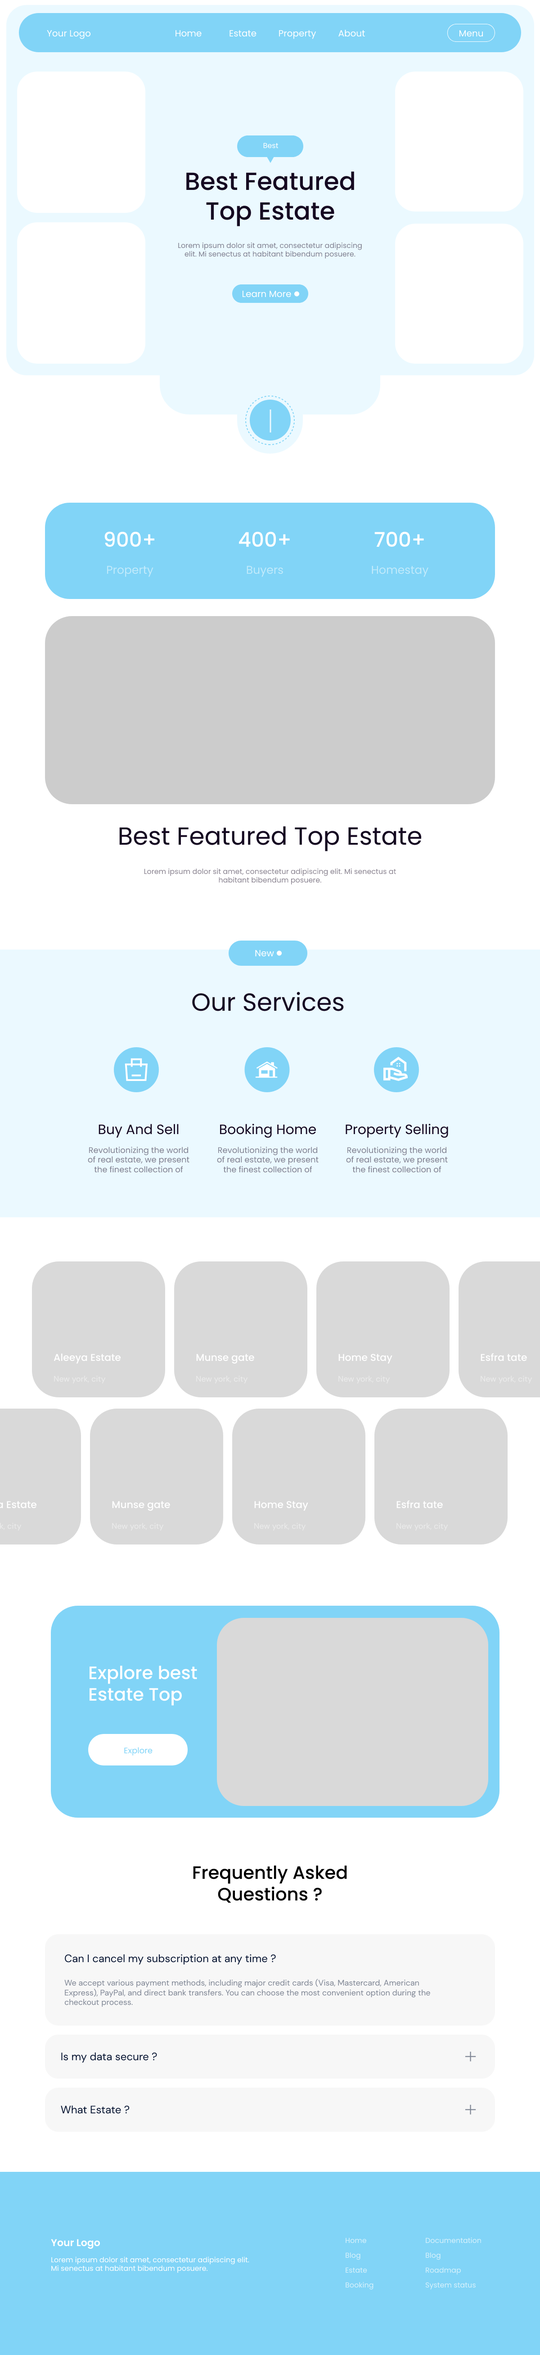
<style>
.page{position:relative;width:540px;height:2355px;background:#ffffff}
.page>*{position:absolute;margin:0}
.t1{font:9px "Poppins-Regular";color:#ffffff}
.t2{font:7.2px "Poppins-Regular";color:#ffffff}
.t3{font:24.8px "Poppins-Medium";color:#150821}
.t4{font:7.2px "Poppins-Regular";color:#808090}
.t5{font:20.2px "Poppins-Medium";color:#ffffff}
.t6{font:11.2px "Poppins-Regular";color:#c0eafb}
.t7{font:24.8px "Poppins-Regular";color:#150821}
.t8{font:7.2px "Poppins-Regular";color:#8a8390}
.t9{font:13.5px "Poppins-Regular";color:#150821}
.t10{font:8.1px "Poppins-Regular";color:#808090}
.t11{font:9.9px "Poppins-Medium";color:#ffffff}
.t12{font:8.1px "DMSans-Regular";color:#ffffff}
.t13{font:18px "Poppins-Medium";color:#ffffff}
.t14{font:8.1px "Poppins-Regular";color:#81d4f8}
.t15{font:18px "Poppins-Medium";color:#000000}
.t16{font:10.8px "DMSans-Regular";color:#071532}
.t17{font:8.1px "DMSans-Regular";color:#7f8694}
.t18{font:7.2px "Poppins-Regular";color:#d8f2fc}
.t19{font:9.9px "Poppins-SemiBold";color:#ffffff}
</style>
<div class="page">
<p class="t1" style="left:338px;top:30px;width:27px;height:7px">About</p>
<p class="t1" style="left:47px;top:30px;width:44px;height:9px">Your Logo</p>
<p class="t1" style="left:176px;top:30px;width:26px;height:7px">Home</p>
<p class="t1" style="left:230px;top:30px;width:26px;height:7px">Estate</p>
<p class="t1" style="left:279px;top:30px;width:37px;height:9px">Property</p>
<p class="t1" style="left:459px;top:30px;width:24px;height:7px">Menu</p>
<p class="t2" style="left:263px;top:143px;width:15px;height:5px">Best</p>
<p class="t3" style="left:186px;top:171px;width:168px;height:55px;text-align:center">Best Featured Top Estate</p>
<p class="t4" style="left:178px;top:242px;width:184px;height:17px;text-align:center">Lorem ipsum dolor sit amet, consectetur adipiscing elit. Mi senectus at habitant bibendum posuere.</p>
<p class="t1" style="left:243px;top:291px;width:48px;height:6px">Learn More</p>
<p class="t5" style="left:104px;top:531px;width:51px;height:16px">900+</p>
<p class="t5" style="left:239px;top:531px;width:51px;height:16px">400+</p>
<p class="t5" style="left:374px;top:531px;width:50px;height:16px">700+</p>
<p class="t6" style="left:107px;top:566px;width:46px;height:11px">Property</p>
<p class="t6" style="left:247px;top:566px;width:36px;height:11px">Buyers</p>
<p class="t6" style="left:372px;top:566px;width:56px;height:11px">Homestay</p>
<p class="t7" style="left:119px;top:826px;width:303px;height:25px">Best Featured Top Estate</p>
<p class="t8" style="left:144px;top:868px;width:252px;height:17px;text-align:center">Lorem ipsum dolor sit amet, consectetur adipiscing elit. Mi senectus at habitant bibendum posuere.</p>
<p class="t1" style="left:255px;top:950px;width:19px;height:7px">New</p>
<p class="t7" style="left:192px;top:992px;width:152px;height:19px">Our Services</p>
<p class="t9" style="left:99px;top:1124px;width:80px;height:14px">Buy And Sell</p>
<p class="t9" style="left:220px;top:1124px;width:96px;height:14px">Booking Home</p>
<p class="t9" style="left:346px;top:1124px;width:102px;height:14px">Property Selling</p>
<p class="t10" style="left:88px;top:1147px;width:101px;height:26px;text-align:center">Revolutionizing the world of real estate, we present the finest collection of</p>
<p class="t10" style="left:217px;top:1147px;width:102px;height:26px;text-align:center">Revolutionizing the world of real estate, we present the finest collection of</p>
<p class="t10" style="left:346px;top:1147px;width:102px;height:26px;text-align:center">Revolutionizing the world of real estate, we present the finest collection of</p>
<p class="t11" style="left:54px;top:1353px;width:67px;height:11px">Aleeya Estate</p>
<p class="t11" style="left:196px;top:1354px;width:58px;height:10px">Munse gate</p>
<p class="t11" style="left:338px;top:1354px;width:54px;height:10px">Home Stay</p>
<p class="t11" style="left:481px;top:1353px;width:46px;height:8px">Esfra tate</p>
<p class="t12" style="left:54px;top:1376px;width:52px;height:7px;opacity:0.5">New york, city</p>
<p class="t12" style="left:196px;top:1376px;width:52px;height:7px;opacity:0.5">New york, city</p>
<p class="t12" style="left:338px;top:1376px;width:52px;height:7px;opacity:0.5">New york, city</p>
<p class="t12" style="left:481px;top:1376px;width:51px;height:7px;opacity:0.5">New york, city</p>
<p class="t11" style="left:112px;top:1501px;width:58px;height:10px">Munse gate</p>
<p class="t11" style="left:254px;top:1501px;width:54px;height:10px">Home Stay</p>
<p class="t11" style="left:396px;top:1500px;width:47px;height:8px">Esfra tate</p>
<p class="t12" style="left:112px;top:1523px;width:52px;height:7px;opacity:0.5">New york, city</p>
<p class="t12" style="left:254px;top:1523px;width:52px;height:7px;opacity:0.5">New york, city</p>
<p class="t12" style="left:396px;top:1523px;width:52px;height:7px;opacity:0.5">New york, city</p>
<p class="t13" style="left:90px;top:1665px;width:107px;height:41px">Explore best<br>Estate Top</p>
<p class="t14" style="left:124px;top:1747px;width:29px;height:8px">Explore</p>
<p class="t15" style="left:193px;top:1865px;width:154px;height:38px;text-align:center">Frequently Asked Questions ?</p>
<p class="t16" style="left:65px;top:1954px;width:211px;height:11px">Can I cancel my subscription at any time ?</p>
<p class="t17" style="left:64px;top:1979px;width:366px;height:28px">We accept various payment methods, including major credit cards (Visa, Mastercard, American Express), PayPal, and direct bank transfers. You can choose the most convenient option during the checkout process.</p>
<p class="t16" style="left:61px;top:2052px;width:96px;height:11px">Is my data secure ?</p>
<p class="t16" style="left:61px;top:2105px;width:69px;height:9px">What Estate ?</p>
<p class="t18" style="left:346px;top:2237px;width:21px;height:6px">Home</p>
<p class="t18" style="left:426px;top:2237px;width:55px;height:6px">Documentation</p>
<p class="t19" style="left:51px;top:2239px;width:49px;height:10px">Your Logo</p>
<p class="t2" style="left:51px;top:2256px;width:198px;height:17px">Lorem ipsum dolor sit amet, consectetur adipiscing elit. Mi senectus at habitant bibendum posuere.</p>
<p class="t18" style="left:346px;top:2252px;width:14px;height:8px">Blog</p>
<p class="t18" style="left:426px;top:2252px;width:15px;height:8px">Blog</p>
<p class="t18" style="left:346px;top:2267px;width:21px;height:6px">Estate</p>
<p class="t18" style="left:426px;top:2267px;width:35px;height:8px">Roadmap</p>
<p class="t18" style="left:346px;top:2282px;width:28px;height:8px">Booking</p>
<p class="t18" style="left:425px;top:2282px;width:51px;height:8px">System status</p>
</div>
